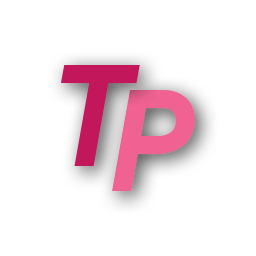
<style>
.page{position:relative;width:256px;height:256px;background:#ffffff}
.page>*{position:absolute;margin:0}
.t1{font:141.2px "ProductSans-BoldItalic";letter-spacing:-0.22em;color:#c2185b}
.t2{font:141.2px "ProductSans-BoldItalic";letter-spacing:-0.22em;color:#f06292}
</style>
<div class="page">
<p class="t1" style="left:61px;top:65px;width:79px;height:101px">T</p>
<p class="t2" style="left:112px;top:90px;width:83px;height:101px">P</p>
</div>
